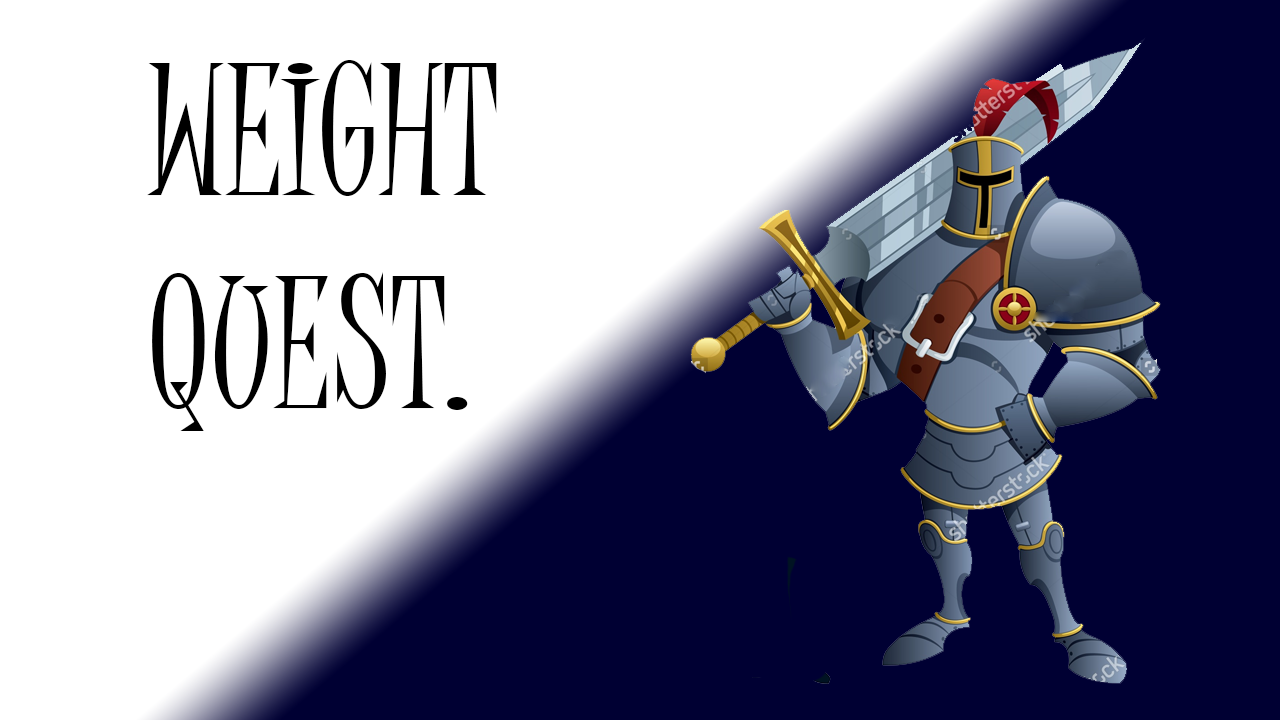
<style>
.page{position:relative;width:1280px;height:720px;background:#ffffff}
.page>*{position:absolute;margin:0}
.t1{font:177.8px "JuiceITC-Regular";color:#000000}
</style>
<div class="page">
<p class="t1" style="left:147px;top:60px;width:350px;height:371px">WEIGHT<br>QUEST.</p>
</div>
